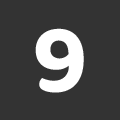
<style>
.page{position:relative;width:120px;height:120px;background:#333333}
.page>*{position:absolute;margin:0}
.t1{font:100px "Baloo2-Bold";letter-spacing:0.005em;color:#ffffff}
</style>
<div class="page">
<p class="t1" style="left:35px;top:28px;width:49px;height:65px">9</p>
</div>
